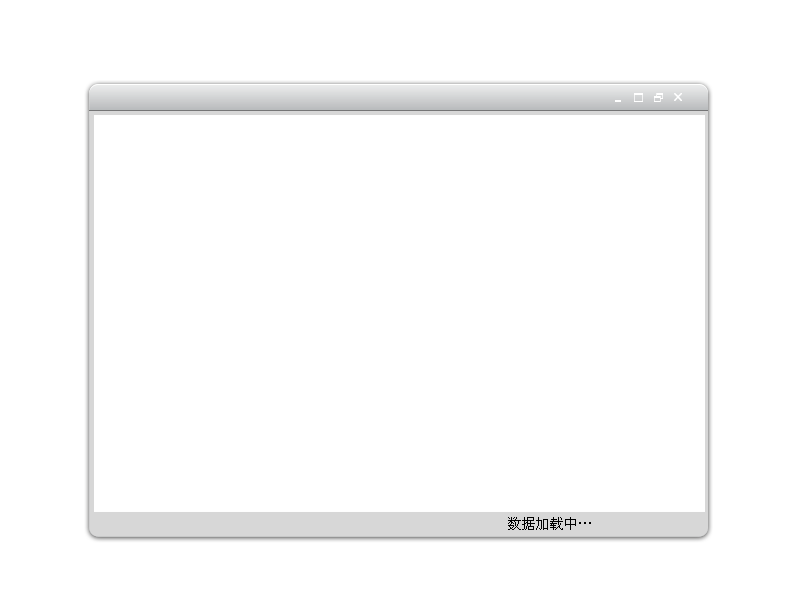
<style>
.page{position:relative;width:800px;height:600px;background:#ffffff}
.page>*{position:absolute;margin:0}
.t1{font:14px "SimSun";color:#000000}
</style>
<div class="page">
<p class="t1" style="left:508px;top:517px;width:83px;height:13px">数据加载中…</p>
</div>
